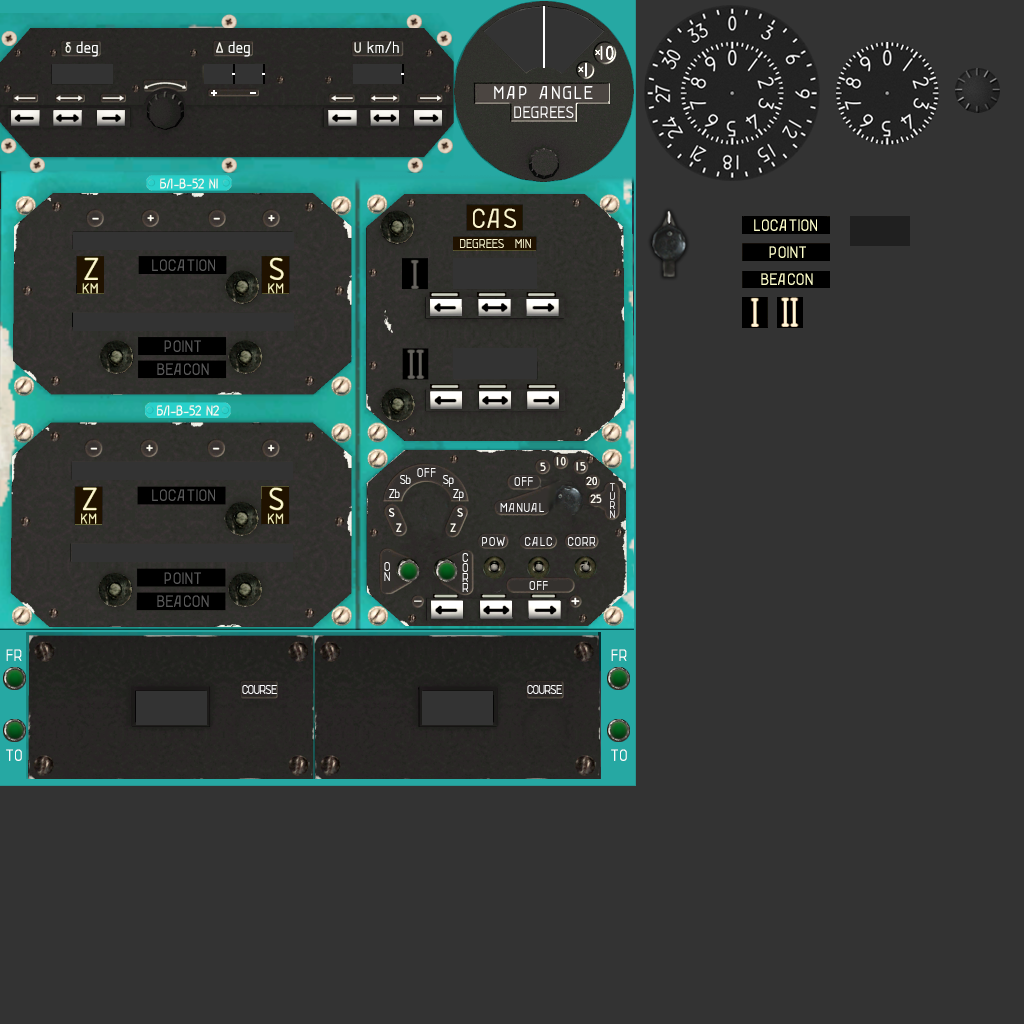
<style>
.page{position:relative;width:1024px;height:1024px;background:#333333}
.page>*{position:absolute;margin:0}
.t1{font:18px "LENYA69";letter-spacing:-0.025em;color:#ffffff}
.t2{font:20px "LENYA69";letter-spacing:0.05em;color:#ffffff}
.t3{font:18px "LENYA69";color:#ffffff}
.t4{font:30px "LENYA69";letter-spacing:-0.025em;color:#fcf6d0}
.t5{font:18px "LENYA69";letter-spacing:-0.025em;color:#ffffcc}
.t6{font:14px "LENYA69";letter-spacing:-0.025em;color:#fcf6d0}
.t7{font:18px "LENYA69";letter-spacing:-0.025em;color:#595959}
.t8{font:18px "LENYA69";letter-spacing:-0.025em;color:#5a5a5a}
.t9{font:14px "LENYA69";color:#ffffff}
.t10{font:14px "LENYA69";letter-spacing:-0.1em;color:#ffffff}
.t11{font:12px/9px "LENYA69";color:#ffffff}
.t12{font:14px/10px "LENYA69";color:#ffffff}
.t13{font:18px "LENYA69";letter-spacing:-0.025em;color:#fefefe}
</style>
<div class="page">
<p class="t1" style="left:76px;top:41px;width:22px;height:16px">deg</p>
<p class="t1" style="left:228px;top:41px;width:22px;height:16px">deg</p>
<p class="t1" style="left:367px;top:41px;width:32px;height:12px">km/h</p>
<p class="t2" style="left:494px;top:86px;width:99px;height:13px">MAP ANGLE</p>
<p class="t3" style="left:514px;top:106px;width:60px;height:12px">DEGREES</p>
<p class="t4" style="left:473px;top:208px;width:43px;height:20px">CAS</p>
<p class="t5" style="left:754px;top:219px;width:63px;height:12px">LOCATION</p>
<p class="t6" style="left:460px;top:239px;width:71px;height:9px">DEGREES  MIN</p>
<p class="t5" style="left:769px;top:246px;width:37px;height:12px">POINT</p>
<p class="t7" style="left:152px;top:259px;width:63px;height:12px">LOCATION</p>
<p class="t5" style="left:761px;top:273px;width:52px;height:12px">BEACON</p>
<p class="t7" style="left:164px;top:340px;width:37px;height:12px">POINT</p>
<p class="t8" style="left:157px;top:363px;width:52px;height:12px">BEACON</p>
<p class="t9" style="left:417px;top:468px;width:19px;height:9px">OFF</p>
<p class="t10" style="left:400px;top:475px;width:11px;height:9px">Sb</p>
<p class="t10" style="left:443px;top:475px;width:11px;height:12px">Sp</p>
<p class="t9" style="left:514px;top:477px;width:19px;height:9px">OFF</p>
<p class="t11" style="left:610px;top:483px;width:5px;height:35px;text-align:center">T<br>U<br>R<br>N</p>
<p class="t7" style="left:152px;top:489px;width:63px;height:12px">LOCATION</p>
<p class="t10" style="left:389px;top:489px;width:11px;height:9px">Zb</p>
<p class="t10" style="left:453px;top:489px;width:11px;height:12px">Zp</p>
<p class="t9" style="left:500px;top:503px;width:44px;height:9px">MANUAL</p>
<p class="t9" style="left:482px;top:537px;width:23px;height:9px">POW</p>
<p class="t9" style="left:525px;top:537px;width:27px;height:9px">CALC</p>
<p class="t9" style="left:568px;top:537px;width:27px;height:9px">CORR</p>
<p class="t12" style="left:462px;top:553px;width:6px;height:39px;text-align:center">C<br>O<br>R<br>R</p>
<p class="t12" style="left:384px;top:562px;width:6px;height:19px;text-align:center">O<br>N</p>
<p class="t7" style="left:164px;top:572px;width:37px;height:12px">POINT</p>
<p class="t9" style="left:529px;top:581px;width:19px;height:9px">OFF</p>
<p class="t8" style="left:157px;top:595px;width:52px;height:12px">BEACON</p>
<p class="t13" style="left:6px;top:649px;width:16px;height:12px">FR</p>
<p class="t13" style="left:611px;top:649px;width:16px;height:12px">FR</p>
<p class="t10" style="left:242px;top:685px;width:35px;height:9px">COURSE</p>
<p class="t10" style="left:527px;top:685px;width:35px;height:9px">COURSE</p>
<p class="t13" style="left:6px;top:749px;width:16px;height:12px">TO</p>
<p class="t13" style="left:611px;top:749px;width:16px;height:12px">TO</p>
</div>
